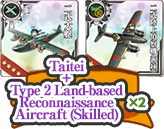
<style>
.page{position:relative;width:164px;height:129px}
.page>*{position:absolute;margin:0}
.t1{font:14px/12px "RyuminPro-ExBold";letter-spacing:-0.08em;color:#8d34b9;font-weight:bold}
.t2{font:12px "UDShinGoPro-Bold";letter-spacing:-0.08em;color:#4e8120;font-weight:bold}
</style>
<div class="page">
<p class="t1" style="left:10px;top:60px;width:113px;height:62px;text-align:center">Taitei<br>+<br>Type 2 Land-based<br>Reconnaissance<br>Aircraft (Skilled)</p>
<p class="t2" style="left:129px;top:97px;width:17px;height:11px">×2</p>
</div>
